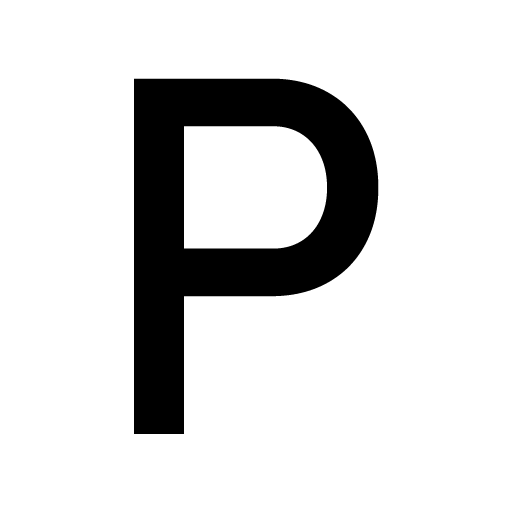
<style>
.page{position:relative;width:512px;height:512px;background:#ffffff}
.page>*{position:absolute;margin:0}
.t1{font:500px "Bahnschrift";color:#000000}
</style>
<div class="page">
<p class="t1" style="left:134px;top:78px;width:245px;height:356px">P</p>
</div>
